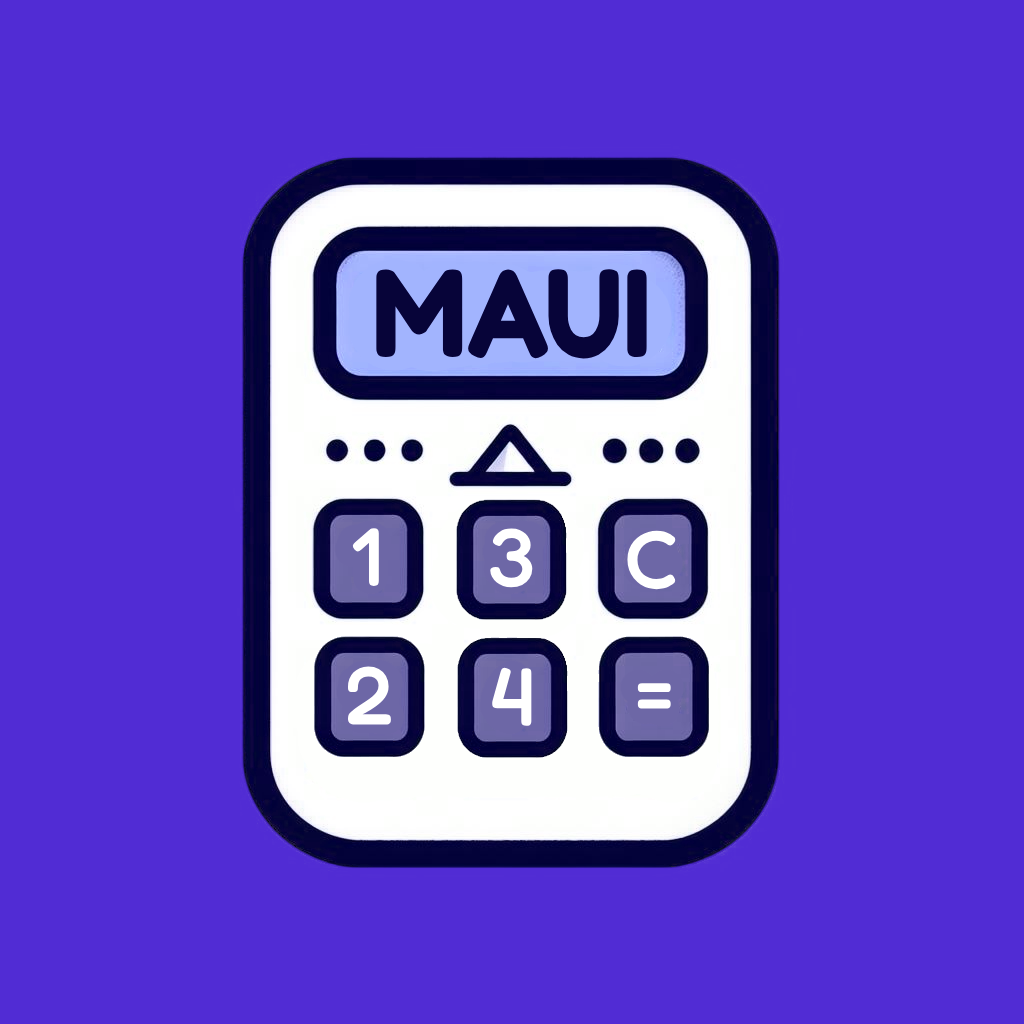
<style>
.page{position:relative;width:1024px;height:1024px;background:#512cd4}
.page>*{position:absolute;margin:0}
.t1{font:119.5px "FredokaOne-Regular";color:#070439;scale:0.91 1}
.t2{font:82.4px "Fredoka-Medium";color:#ffffff}
</style>
<div class="page">
<p class="t1" style="left:376px;top:269px;width:271px;height:90px">MAUI</p>
<p class="t2" style="left:352px;top:528px;width:27px;height:58px">1</p>
<p class="t2" style="left:490px;top:528px;width:43px;height:60px">3</p>
<p class="t2" style="left:627px;top:530px;width:49px;height:60px">C</p>
<p class="t2" style="left:347px;top:666px;width:44px;height:59px">2</p>
<p class="t2" style="left:492px;top:667px;width:40px;height:59px">4</p>
<p class="t2" style="left:637px;top:683px;width:34px;height:26px">=</p>
</div>
